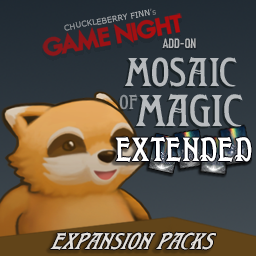
<style>
.page{position:relative;width:256px;height:256px}
.page>*{position:absolute;margin:0}
.t1{font:8px "Verdana";color:#ffffff}
.t2{font:8px "Verdana";color:#ababab}
.t3{font:13.3px "Bahnschrift-SemiBoldCondensed";color:#b3b4b6}
.t4{font:40px/31.1px "WTRRoycroft";color:#b7babd}
.t5{font:44.4px/40px "WTRRoycroft";color:#b7babd}
.t6{font:20px "WTRRoycroft";color:#8b9194}
.t7{font:33.3px "WTRRoycroft";color:#ffffff}
.t8{font:25px "WTRRoycroft";color:#e4e0dc;scale:0.93 1}
</style>
<div class="page">
<p class="t1" style="left:64px;top:8px;width:92px;height:23px;rotate:-10deg">CHUCKLEBERRY FINN<span class="t2">’s</span></p>
<p class="t3" style="left:162px;top:38px;width:34px;height:10px">ADD-ON</p>
<p class="t4" style="left:125px;top:57px;width:118px;height:70px;text-align:center">Mosaic<br>  <span class="t5">Magic</span></p>
<p class="t6" style="left:119px;top:94px;width:19px;height:16px">of</p>
<p class="t7" style="left:115px;top:136px;width:137px;height:26px">EXTENDED</p>
<p class="t8" style="left:50px;top:232px;width:166px;height:18px">Expansion Packs</p>
</div>
